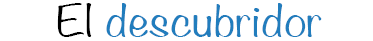
<style>
.page{position:relative;width:373px;height:41px;background:#ffffff}
.page>*{position:absolute;margin:0}
.t1{font:38.8px "Noteworthy-Light";color:#217dbd;scale:1.27 1}
.t2{font:38.8px "Noteworthy-Light";color:#000000;scale:1.27 1}
</style>
<div class="page">
<p class="t1" style="left:57px;top:3px;width:265px;height:34px"><span class="t2">El </span>descubridor</p>
</div>
